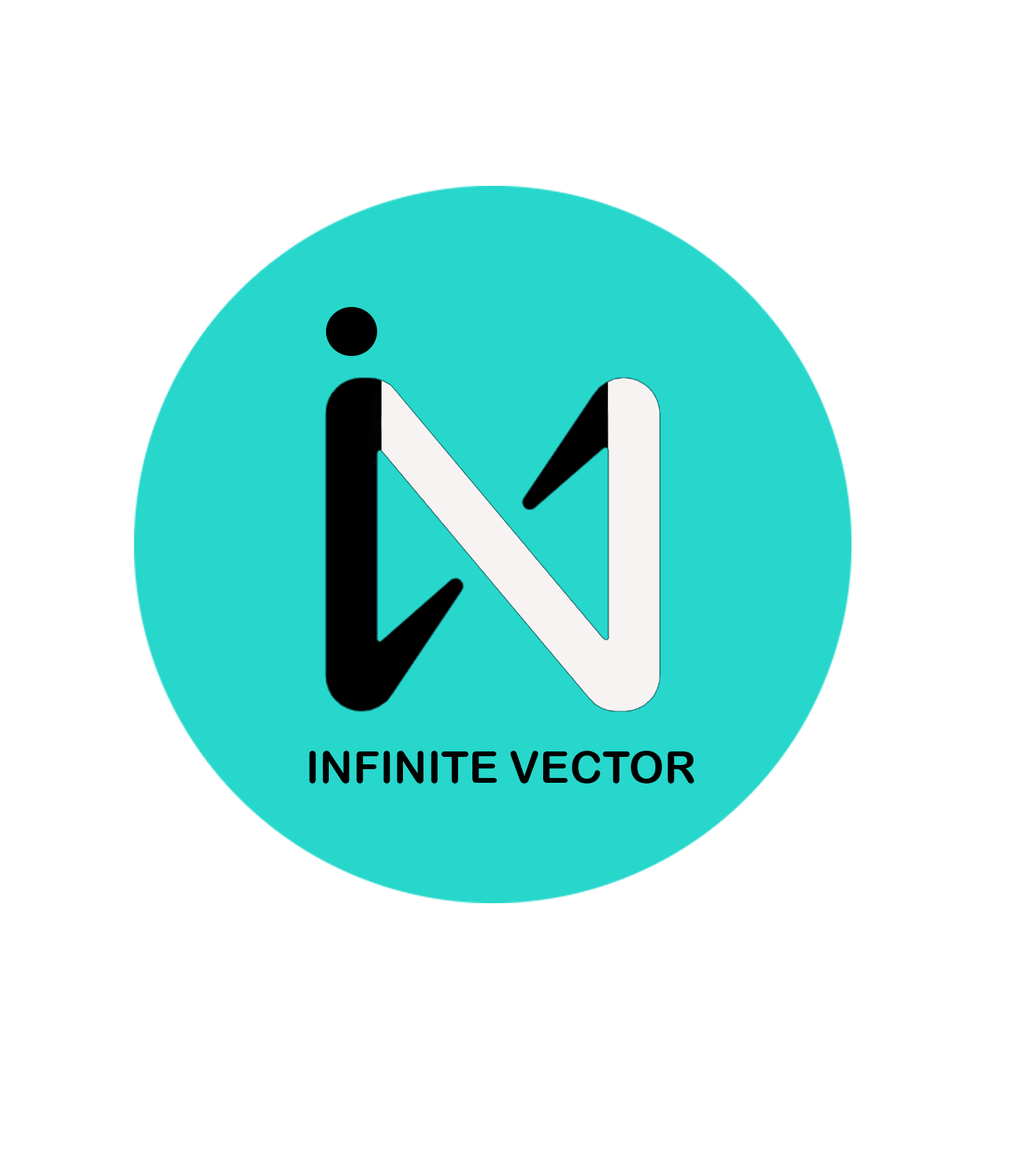
<style>
.page{position:relative;width:1021px;height:1168px;background:#ffffff}
.page>*{position:absolute;margin:0}
.t1{font:44.2px "ArialRoundedMTBold";color:#000000;text-transform:uppercase}
</style>
<div class="page">
<p class="t1" style="left:309px;top:751px;width:385px;height:32px">Infinite Vector</p>
</div>
